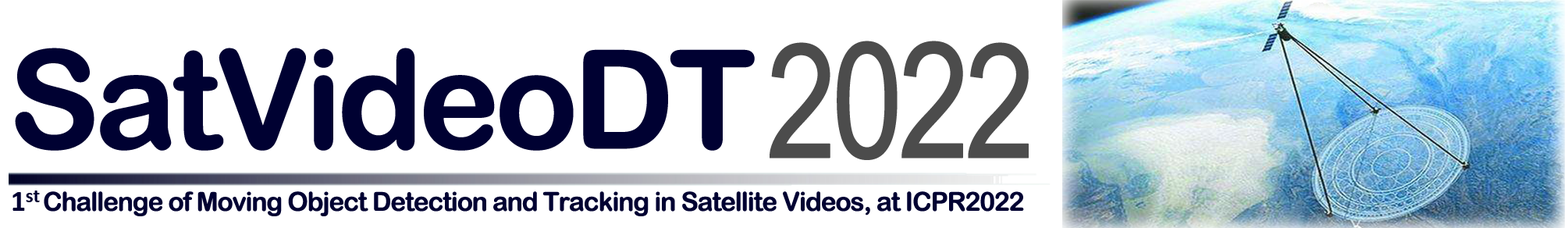
<style>
.page{position:relative;width:1568px;height:228px;background:#ffffff}
.page>*{position:absolute;margin:0}
.t1{font:161.2px "ArialMT";letter-spacing:-0.06em;color:#4c4c4c;font-weight:bold;scale:0.79 1}
.t2{font:159.3px "ArialMT";letter-spacing:-0.06em;color:#4c4c4c;font-weight:bold;scale:0.79 1}
.t3{font:136.6px "ArialRoundedMTBold";letter-spacing:-0.06em;color:#000132;font-weight:bold}
.t4{font:26px "ArialRoundedMTBold";letter-spacing:-0.06em;color:#000132;font-weight:bold}
</style>
<div class="page">
<p class="t1" style="left:770px;top:41px;width:259px;height:119px"><span class="t2">2</span>02<span class="t2">2</span></p>
<p class="t3" style="left:15px;top:48px;width:740px;height:103px">SatVideoDT</p>
<p class="t4" style="left:44px;top:191px;width:980px;height:25px">Challenge of Moving Object Detection and Tracking in Satellite Videos, at ICPR2022</p>
</div>
